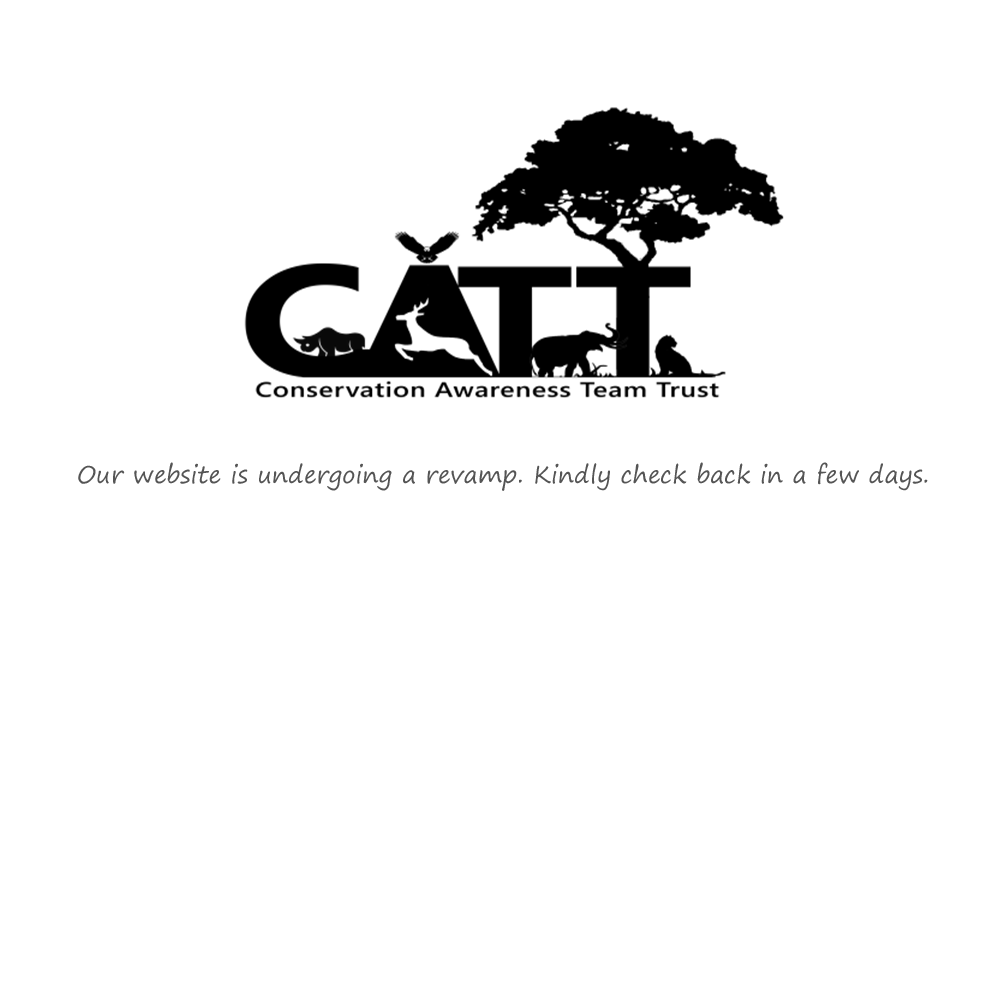
<style>
.page{position:relative;width:1000px;height:1000px;background:#ffffff}
.page>*{position:absolute;margin:0}
.t1{font:24px "SegoePrint";color:#555555}
</style>
<div class="page">
<p class="t1" style="left:78px;top:462px;width:850px;height:29px">Our website is undergoing a revamp. Kindly check back in a few days.</p>
</div>
